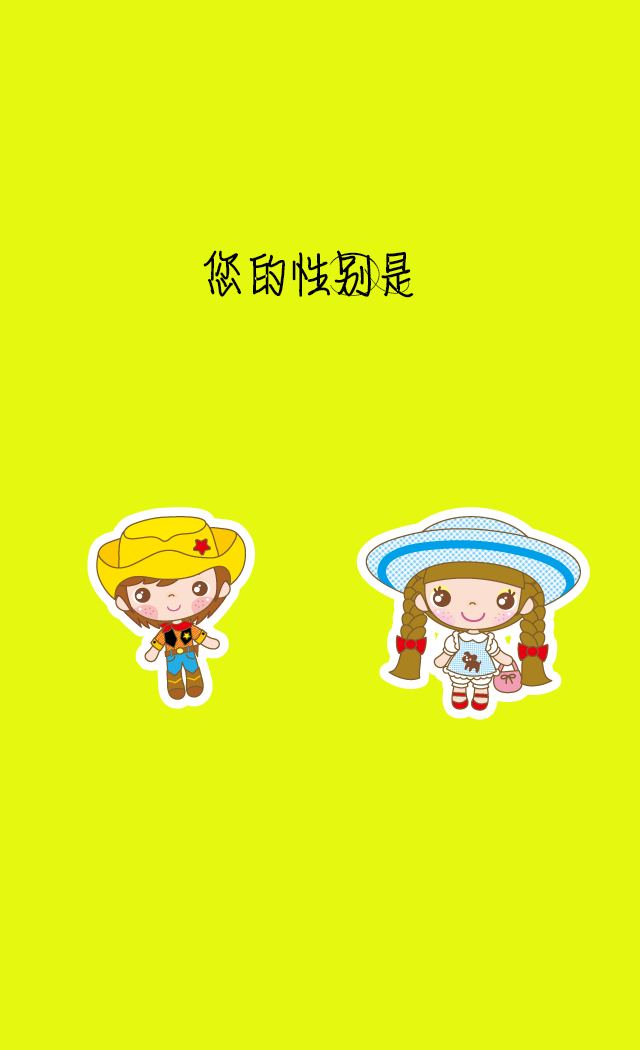
<style>
.page{position:relative;width:640px;height:1050px;background:#e5f810}
.page>*{position:absolute;margin:0}
.t1{font:48px "¹ - ÇéÊéÌå";letter-spacing:-0.04em;color:#000000}
</style>
<div class="page">
<p class="t1" style="left:203px;top:250px;width:211px;height:48px">您的性别是</p>
</div>
